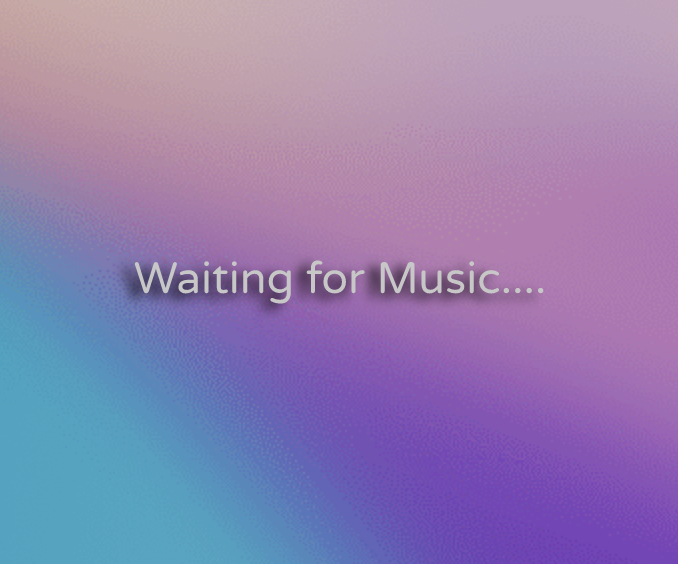
<style>
.page{position:relative;width:678px;height:564px}
.page>*{position:absolute;margin:0}
.t1{font:44px "VarelaRound-Regular";color:#c7c7c7}
</style>
<div class="page">
<p class="t1" style="left:134px;top:260px;width:410px;height:44px">Waiting for Music....</p>
</div>
